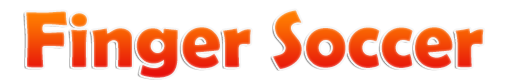
<style>
.page{position:relative;width:512px;height:83px;background:#ffffff}
.page>*{position:absolute;margin:0}
.t1{font:80px "BerlinSansFBDemi-Bold"}
</style>
<div class="page">
<p class="t1" style="left:26px;top:10px;width:458px;height:68px">Finger Soccer</p>
</div>
